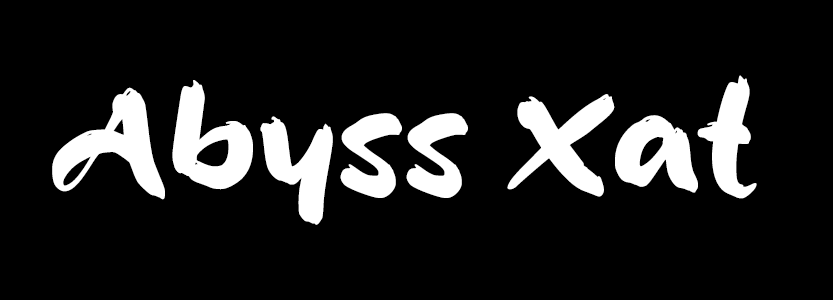
<style>
.page{position:relative;width:833px;height:300px;background:#000000}
.page>*{position:absolute;margin:0}
.t1{font:150px "aAtos";color:#ffffff;font-weight:bold}
</style>
<div class="page">
<p class="t1" style="left:52px;top:75px;width:705px;height:150px">Abyss Xat</p>
</div>
